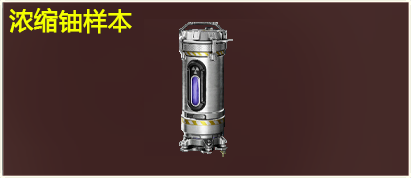
<style>
.page{position:relative;width:411px;height:178px}
.page>*{position:absolute;margin:0}
.t1{font:24px "MicrosoftYaHei";color:#f4ff00;font-weight:bold}
</style>
<div class="page">
<p class="t1" style="left:9px;top:8px;width:123px;height:26px">浓缩铀样本</p>
</div>
